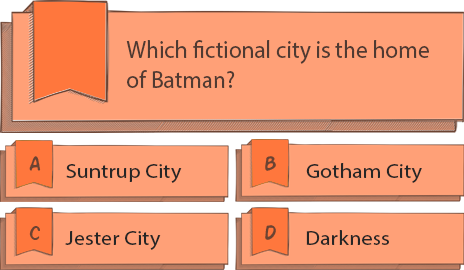
<style>
.page{position:relative;width:464px;height:270px;background:#ffa077}
.page>*{position:absolute;margin:0}
.t1{font:25px "MyriadPro-Regular";color:#4f3a32;scale:0.93 1}
.t2{font:22.2px "ActionMan";color:#6b4332}
.t3{font:20.8px "MyriadPro-Regular";color:#262626;scale:1.07 1}
</style>
<div class="page">
<p class="t1" style="left:126px;top:40px;width:303px;height:48px">Which fictional city is the home of Batman?</p>
<p class="t2" style="left:29px;top:156px;width:12px;height:15px">A</p>
<p class="t2" style="left:265px;top:156px;width:11px;height:15px">B</p>
<p class="t3" style="left:66px;top:164px;width:116px;height:19px">Suntrup City</p>
<p class="t3" style="left:306px;top:163px;width:116px;height:20px">Gotham City</p>
<p class="t2" style="left:29px;top:226px;width:11px;height:14px">C</p>
<p class="t3" style="left:65px;top:231px;width:96px;height:19px">Jester City</p>
<p class="t2" style="left:265px;top:225px;width:11px;height:15px">D</p>
<p class="t3" style="left:306px;top:230px;width:83px;height:15px">Darkness</p>
</div>
